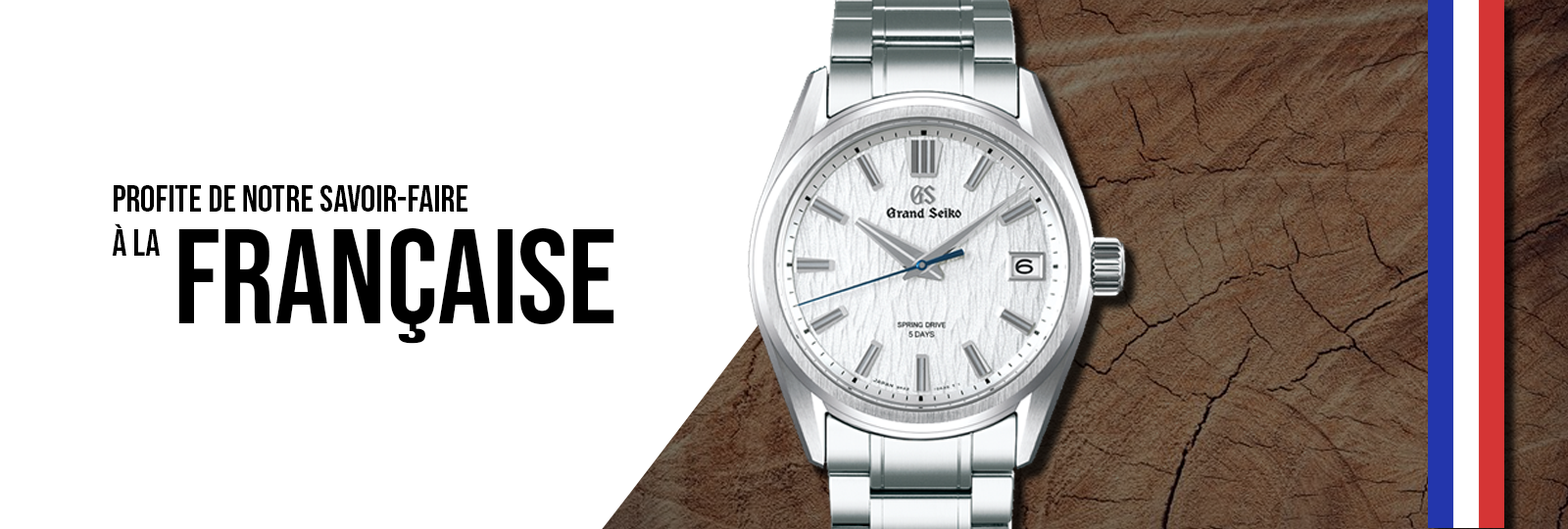
<style>
.page{position:relative;width:1568px;height:529px;background:#ffffff}
.page>*{position:absolute;margin:0}
.t1{font:36.8px "BebasNeue-Regular";color:#000000}
.t2{font:134.8px "BebasNeue-Regular";color:#000000}
</style>
<div class="page">
<p class="t1" style="left:112px;top:185px;width:355px;height:71px">profite de notre savoir-faire<br>à la</p>
<p class="t2" style="left:178px;top:228px;width:436px;height:116px">française</p>
</div>
